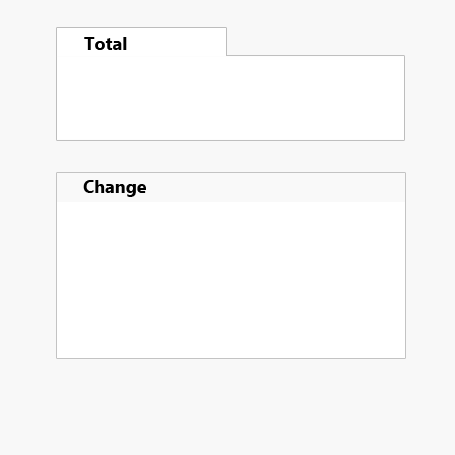
<style>
.page{position:relative;width:455px;height:455px;background:#f8f8f8}
.page>*{position:absolute;margin:0}
.t1{font:18px "Ebrima-Bold";color:#000000}
</style>
<div class="page">
<p class="t1" style="left:84px;top:37px;width:43px;height:13px">Total</p>
<p class="t1" style="left:83px;top:180px;width:63px;height:17px">Change</p>
</div>
